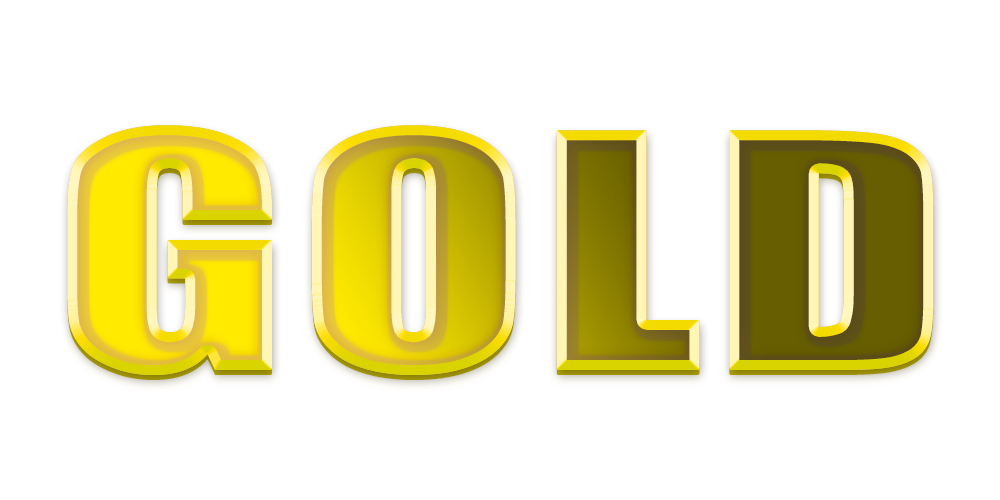
<style>
.page{position:relative;width:1000px;height:500px;background:#ffffff}
.page>*{position:absolute;margin:0}
.t1{font:300px "Impact";text-transform:uppercase;font-weight:bold;scale:1.41 1}
</style>
<div class="page">
<p class="t1" style="left:67px;top:125px;width:867px;height:250px">gold</p>
<p class="t1" style="left:67px;top:125px;width:867px;height:250px">gold</p>
<p class="t1" style="left:67px;top:130px;width:867px;height:250px">gold</p>
</div>
